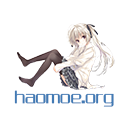
<style>
.page{position:relative;width:128px;height:128px;background:#ffffff}
.page>*{position:absolute;margin:0}
.t1{font:19px "FZZQK--GBK1-0";color:#417ab4;font-weight:bold}
</style>
<div class="page">
<p class="t1" style="left:14px;top:90px;width:100px;height:17px">haomoe.org</p>
</div>
